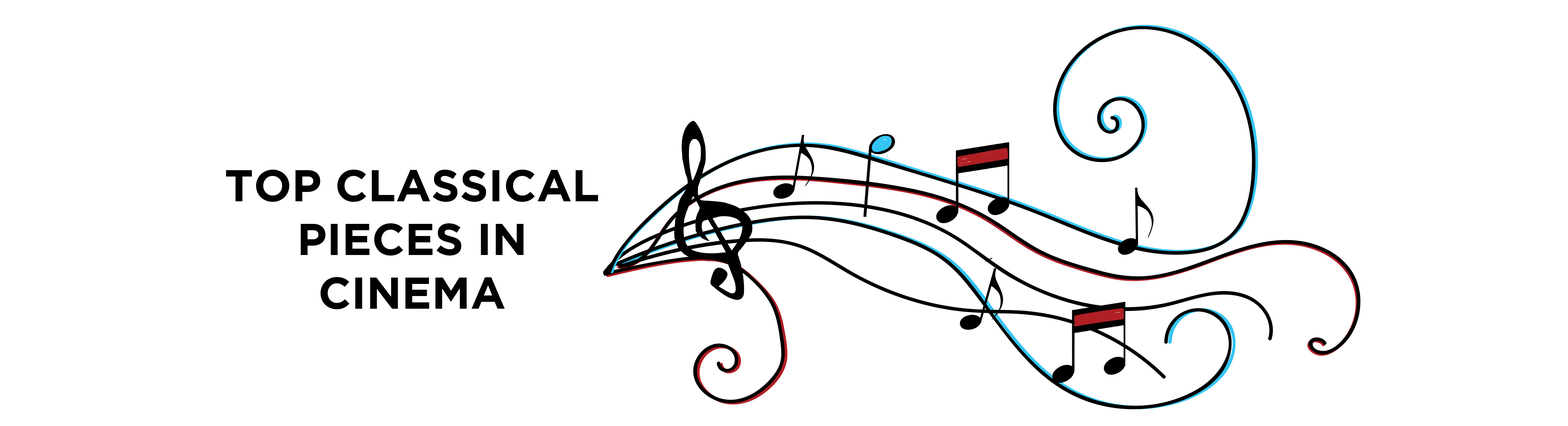
<style>
.page{position:relative;width:1568px;height:426px;background:#ffffff}
.page>*{position:absolute;margin:0}
.t1{font:44.8px "GothamBold";color:#000000}
</style>
<div class="page">
<p class="t1" style="left:226px;top:170px;width:372px;height:139px;text-align:center">TOP CLASSICAL PIECES IN CINEMA</p>
</div>
